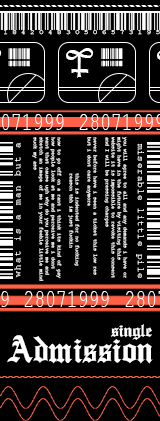
<style>
.page{position:relative;width:160px;height:421px;background:#000000}
.page>*{position:absolute;margin:0}
.t1{font:12px "Code128";letter-spacing:0.1em;color:#ffffff}
.t2{font:37px "Agathodaimon";letter-spacing:0.52em;color:#ffffff}
.t3{font:5.7px "Code128";letter-spacing:0.1em;color:#ffffff;scale:2.11 1}
.t4{font:5px/6px "CourierNewPSMT";color:#ffffff}
.t5{font:9px "CourierNewPSMT";letter-spacing:0.2em;color:#ffffff}
.t6{font:9px "CourierNewPSMT";letter-spacing:0.12em;color:#ffffff}
.t7{font:25.5px "CourierNewPSMT";color:#ffffff;scale:0.71 1}
.t8{font:20px "Ancient-Medium";color:#ffffff}
.t9{font:41px "Ancient-Medium";color:#ffffff;scale:0.92 1}
</style>
<div class="page">
<p class="t1" style="left:8px;top:48px;width:22px;height:12px">ofjd</p>
<p class="t2" style="left:66px;top:48px;width:28px;height:30px">e</p>
<p class="t1" style="left:101px;top:48px;width:22px;height:11px">ofjd</p>
<p class="t3" style="left:8px;top:60px;width:22px;height:7px">ofjd</p>
<p class="t3" style="left:101px;top:60px;width:22px;height:7px">ofjd</p>
<p class="t4" style="left:32px;top:137px;width:96px;height:144px;rotate:90deg">you will agree to all and any demands i have or<br>might have in the future by visiting this<br>website it is impossible to revoke this consent<br>and I will be pressing charges<br><br>never before have i seen a ticket this low res<br>but i dont care anymore<br><br> this is indented for no fucking<br> reason tbh im just fuckin<br><br>now to go off on a rant i think its kind of gay<br>how people look at me and perceive me i dont<br>want that cause ugh why do you perceive me and<br>sketch an image of me in your feeble little mind<br>suck my ass</p>
<p class="t5" style="left:14px;top:142px;width:7px;height:136px;rotate:-90deg">what is a man but a</p>
<p class="t6" style="left:136px;top:143px;width:8px;height:135px;rotate:90deg">miserable little pile</p>
<p class="t7" style="left:24px;top:291px;width:85px;height:16px">28071999</p>
<p class="t8" style="left:111px;top:324px;width:41px;height:16px">single</p>
<p class="t9" style="left:7px;top:335px;width:146px;height:29px">Admission</p>
</div>
